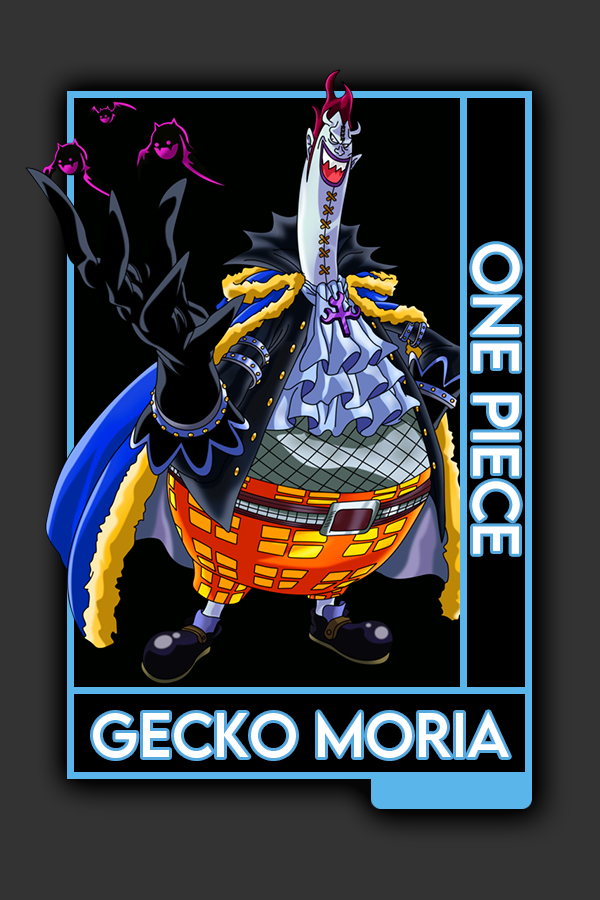
<style>
.page{position:relative;width:600px;height:900px;background:#333333}
.page>*{position:absolute;margin:0}
.t1{font:58.4px "LEMONMILK-Regular";color:#ffffff}
.t2{font:55.4px "LEMONMILK-Regular";color:#ffffff}
</style>
<div class="page">
<p class="t1" style="left:472px;top:244px;width:48px;height:310px;rotate:90deg">One Piece</p>
<p class="t2" style="left:93px;top:712px;width:416px;height:46px">Gecko Moria</p>
</div>
